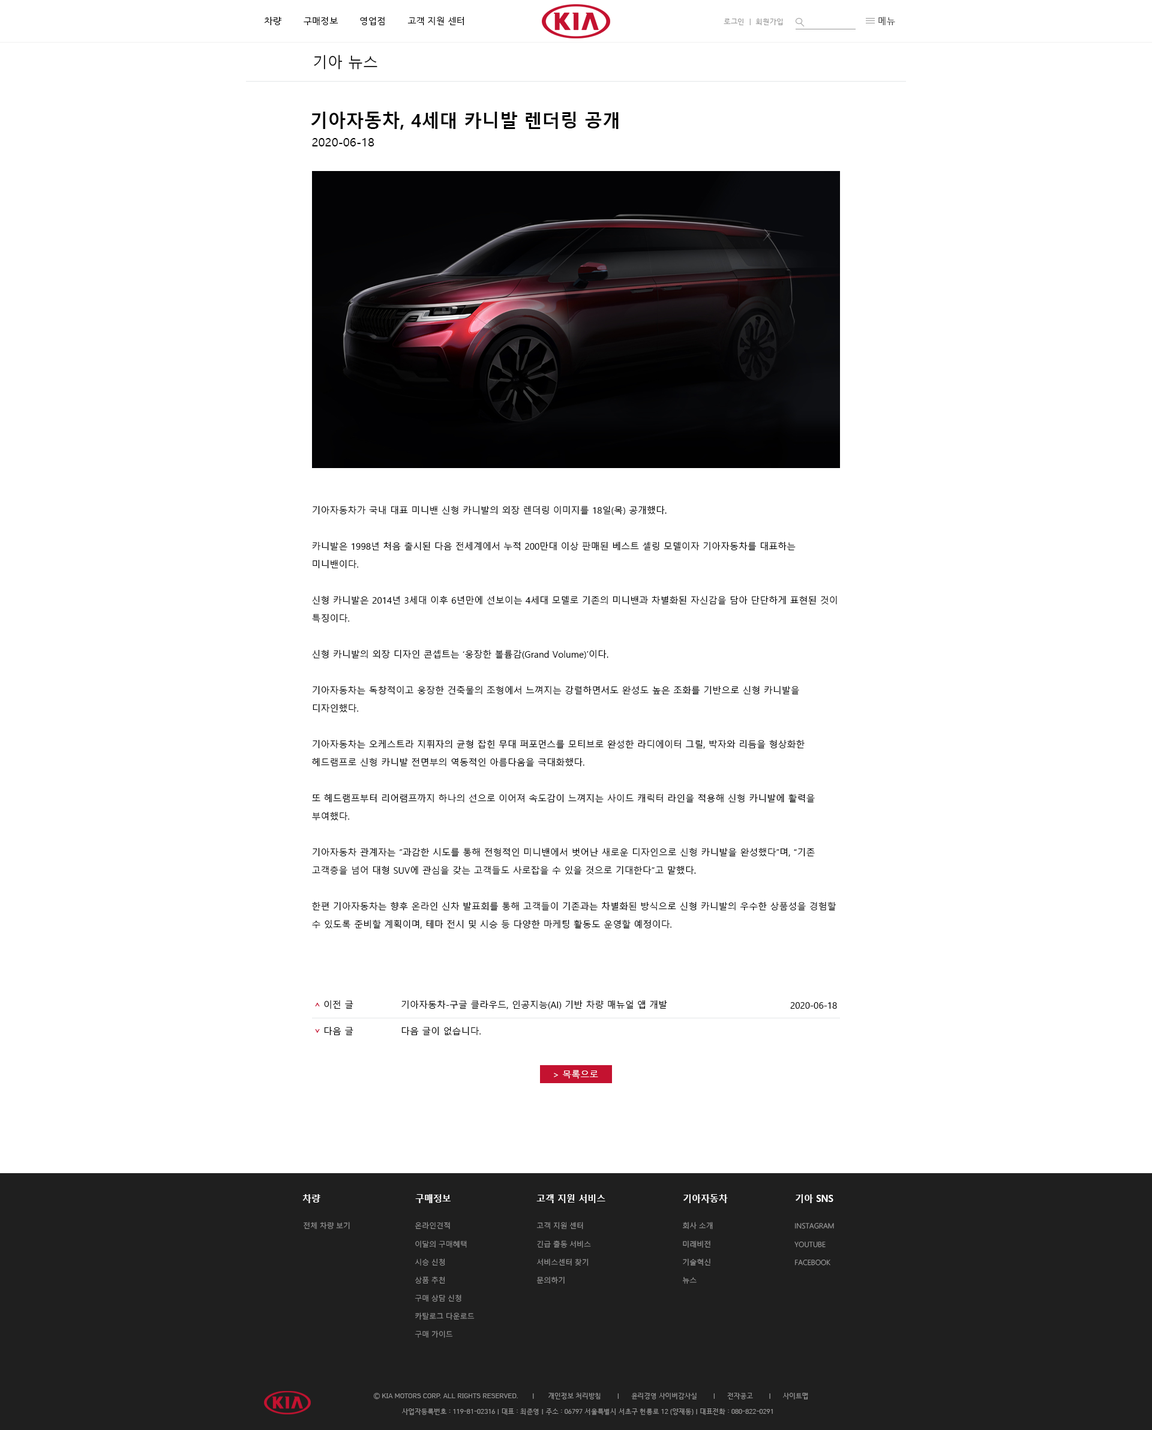
<style>
.page{position:relative;width:1152px;height:1430px;background:#ffffff}
.page>*{position:absolute;margin:0}
.t1{font:9px "HCRDotum";color:#000000}
.t2{font:9px "HCRDotum";color:#4c4c4c}
.t3{font:7.2px "HCRDotum";color:#979797}
.t4{font:14.9px "MalgunGothic";color:#000000}
.t5{font:18px "MalgunGothicBold";color:#000000}
.t6{font:12px "MalgunGothic";color:#010101}
.t7{font:9px/18px "MalgunGothic";color:#000000}
.t8{font:9px "MalgunGothic";color:#000000}
.t9{font:9px "MalgunGothic";color:#ffffff}
.t10{font:9.3px "MalgunGothicBold";color:#ffffff;scale:0.96 1}
.t11{font:7.2px "MalgunGothic-Semilight";color:#979797}
.t12{font:7.2px/18.1px "MalgunGothic-Semilight";color:#979797}
.t13{font:6.6px "HCRDotum";color:#999999}
</style>
<div class="page">
<p class="t1" style="left:264px;top:17px;width:200px;height:8px">차량        구매정보        영업점        고객 지원 센터</p>
<p class="t2" style="left:878px;top:17px;width:17px;height:8px">메뉴</p>
<p class="t3" style="left:724px;top:19px;width:59px;height:6px">로그인  |  회원가입</p>
<p class="t4" style="left:314px;top:55px;width:63px;height:15px">기아 뉴스</p>
<p class="t5" style="left:311px;top:112px;width:308px;height:18px">기아자동차, 4세대 카니발 렌더링 공개</p>
<p class="t6" style="left:312px;top:138px;width:62px;height:8px">2020-06-18</p>
<p class="t7" style="left:312px;top:506px;width:525px;height:423px">기아자동차가 국내 대표 미니밴 신형 카니발의 외장 렌더링 이미지를 18일(목) 공개했다.<br><br>카니발은 1998년 처음 출시된 다음 전세계에서 누적 200만대 이상 판매된 베스트 셀링 모델이자 기아자동차를 대표하는 미니밴이다.<br><br>신형 카니발은 2014년 3세대 이후 6년만에 선보이는 4세대 모델로 기존의 미니밴과 차별화된 자신감을 담아 단단하게 표현된 것이 특징이다.<br><br>신형 카니발의 외장 디자인 콘셉트는 ‘웅장한 볼륨감(Grand Volume)’이다.<br><br>기아자동차는 독창적이고 웅장한 건축물의 조형에서 느껴지는 강렬하면서도 완성도 높은 조화를 기반으로 신형 카니발을 디자인했다.<br><br>기아자동차는 오케스트라 지휘자의 균형 잡힌 무대 퍼포먼스를 모티브로 완성한 라디에이터 그릴, 박자와 리듬을 형상화한 헤드램프로 신형 카니발 전면부의 역동적인 아름다움을 극대화했다.<br><br>또 헤드램프부터 리어램프까지 하나의 선으로 이어져 속도감이 느껴지는 사이드 캐릭터 라인을 적용해 신형 카니발에 활력을 부여했다.<br><br>기아자동차 관계자는 “과감한 시도를 통해 전형적인 미니밴에서 벗어난 새로운 디자인으로 신형 카니발을 완성했다”며, “기존 고객층을 넘어 대형 SUV에 관심을 갖는 고객들도 사로잡을 수 있을 것으로 기대한다”고 말했다.<br><br>한편 기아자동차는 향후 온라인 신차 발표회를 통해 고객들이 기존과는 차별화된 방식으로 신형 카니발의 우수한 상품성을 경험할 수 있도록 준비할 계획이며, 테마 전시 및 시승 등 다양한 마케팅 활동도 운영할 예정이다.</p>
<p class="t8" style="left:324px;top:1000px;width:29px;height:9px">이전 글</p>
<p class="t8" style="left:401px;top:1000px;width:266px;height:9px">기아자동차-구글 클라우드, 인공지능(AI) 기반 차량 매뉴얼 앱 개발</p>
<p class="t8" style="left:790px;top:1002px;width:47px;height:7px">2020-06-18</p>
<p class="t8" style="left:324px;top:1027px;width:29px;height:9px">다음 글</p>
<p class="t8" style="left:401px;top:1027px;width:80px;height:9px">다음 글이 없습니다.</p>
<p class="t9" style="left:554px;top:1070px;width:44px;height:9px">&gt; 목록으로</p>
<p class="t10" style="left:302px;top:1194px;width:18px;height:9px">차량</p>
<p class="t10" style="left:415px;top:1194px;width:36px;height:9px">구매정보</p>
<p class="t10" style="left:536px;top:1194px;width:69px;height:9px">고객 지원 서비스</p>
<p class="t10" style="left:683px;top:1194px;width:45px;height:9px">기아자동차</p>
<p class="t10" style="left:796px;top:1194px;width:37px;height:9px">기아 SNS</p>
<p class="t11" style="left:304px;top:1222px;width:46px;height:7px">전체 차량 보기</p>
<p class="t12" style="left:415px;top:1222px;width:60px;height:116px">온라인견적<br>이달의 구매혜택<br>시승 신청<br>상품 추천<br>구매 상담 신청<br>카탈로그 다운로드<br>구매 가이드</p>
<p class="t12" style="left:536px;top:1222px;width:55px;height:62px">고객 지원 센터<br>긴급 출동 서비스<br>서비스센터 찾기<br>문의하기</p>
<p class="t12" style="left:682px;top:1222px;width:31px;height:62px">회사 소개<br>미래비전<br>기술혁신<br>뉴스</p>
<p class="t12" style="left:794px;top:1223px;width:40px;height:42px">INSTAGRAM<br>YOUTUBE<br>FACEBOOK</p>
<p class="t13" style="left:373px;top:1393px;width:435px;height:6px">Ⓒ KIA MOTORS CORP. ALL RIGHTS RESERVED.       |       개인정보 처리방침        |      윤리경영 사이버감사실        |      전자공고        |      사이트맵</p>
<p class="t13" style="left:402px;top:1408px;width:371px;height:7px">사업자등록번호 : 119-81-02316 | 대표 : 최준영 | 주소 : 06797 서울특별시 서초구 헌릉로 12 (양재동) | 대표전화 : 080-822-0291</p>
</div>
